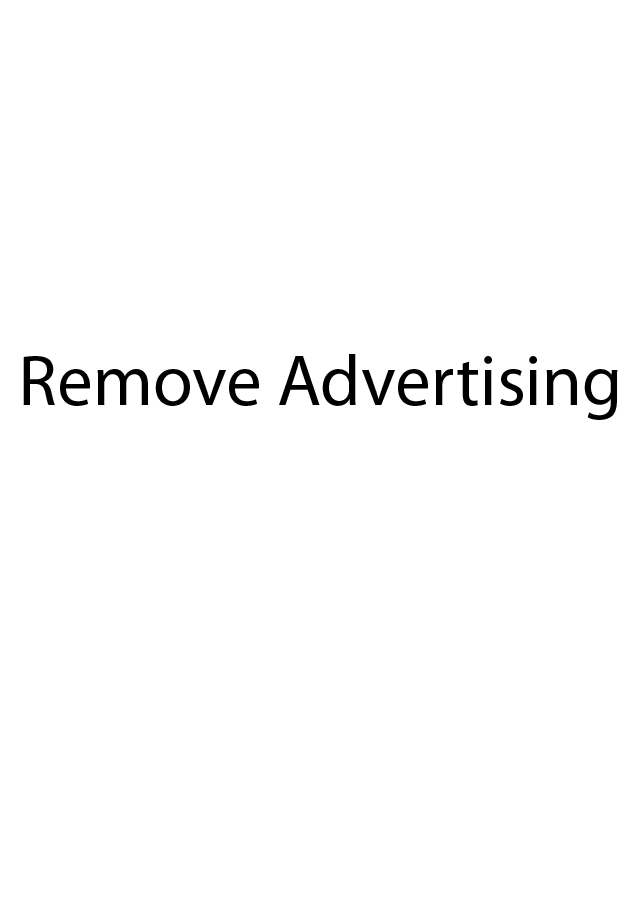
<style>
.page{position:relative;width:640px;height:920px;background:#ffffff}
.page>*{position:absolute;margin:0}
.t1{font:72px "MyriadPro-Regular";color:#000000}
</style>
<div class="page">
<p class="t1" style="left:23px;top:354px;width:595px;height:66px">Remove Advertising</p>
</div>
